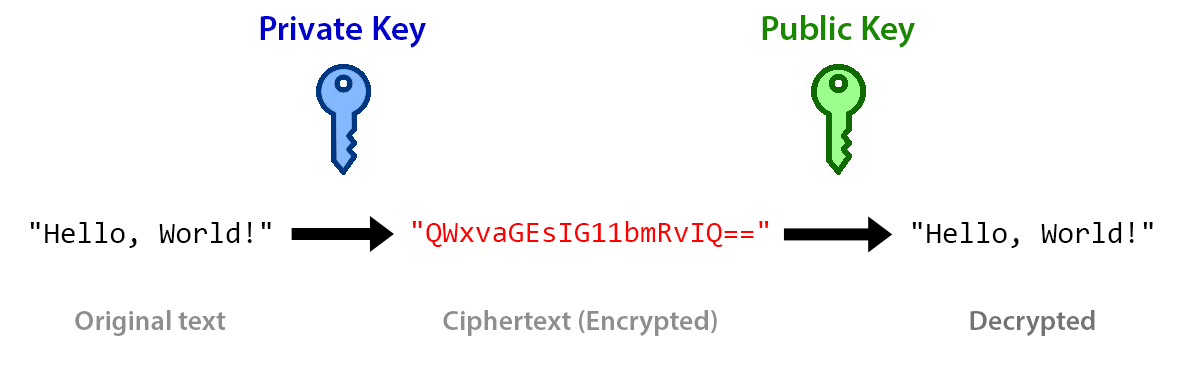
<style>
.page{position:relative;width:1195px;height:382px;background:#ffffff}
.page>*{position:absolute;margin:0}
.t1{font:35px "MyriadPro-Semibold";color:#0000cc}
.t2{font:35px "MyriadPro-Semibold";color:#198700}
.t3{font:30px "Consolas";color:#000000}
.t4{font:30px "Consolas";color:#ff0000}
.t5{font:28px "MyriadPro-Semibold";color:#8e8e8e}
.t6{font:28px "MyriadPro-Semibold";color:#737373}
</style>
<div class="page">
<p class="t1" style="left:260px;top:16px;width:166px;height:32px">Private Key</p>
<p class="t2" style="left:762px;top:15px;width:153px;height:33px">Public Key</p>
<p class="t3" style="left:30px;top:222px;width:241px;height:26px">"Hello, World!"</p>
<p class="t4" style="left:412px;top:221px;width:357px;height:26px">"QWxvaGEsIG11bmRvIQ=="</p>
<p class="t3" style="left:912px;top:222px;width:241px;height:26px">"Hello, World!"</p>
<p class="t5" style="left:75px;top:310px;width:151px;height:26px">Original text</p>
<p class="t5" style="left:443px;top:310px;width:274px;height:26px">Ciphertext (Encrypted)</p>
<p class="t6" style="left:970px;top:310px;width:125px;height:26px">Decrypted</p>
</div>
